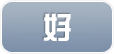
<style>
.page{position:relative;width:114px;height:54px}
.page>*{position:absolute;margin:0}
.t1{font:30px "JZhongYi";letter-spacing:0.05em;color:#ffffff}
</style>
<div class="page">
<p class="t1" style="left:43px;top:13px;width:28px;height:28px">好</p>
</div>
